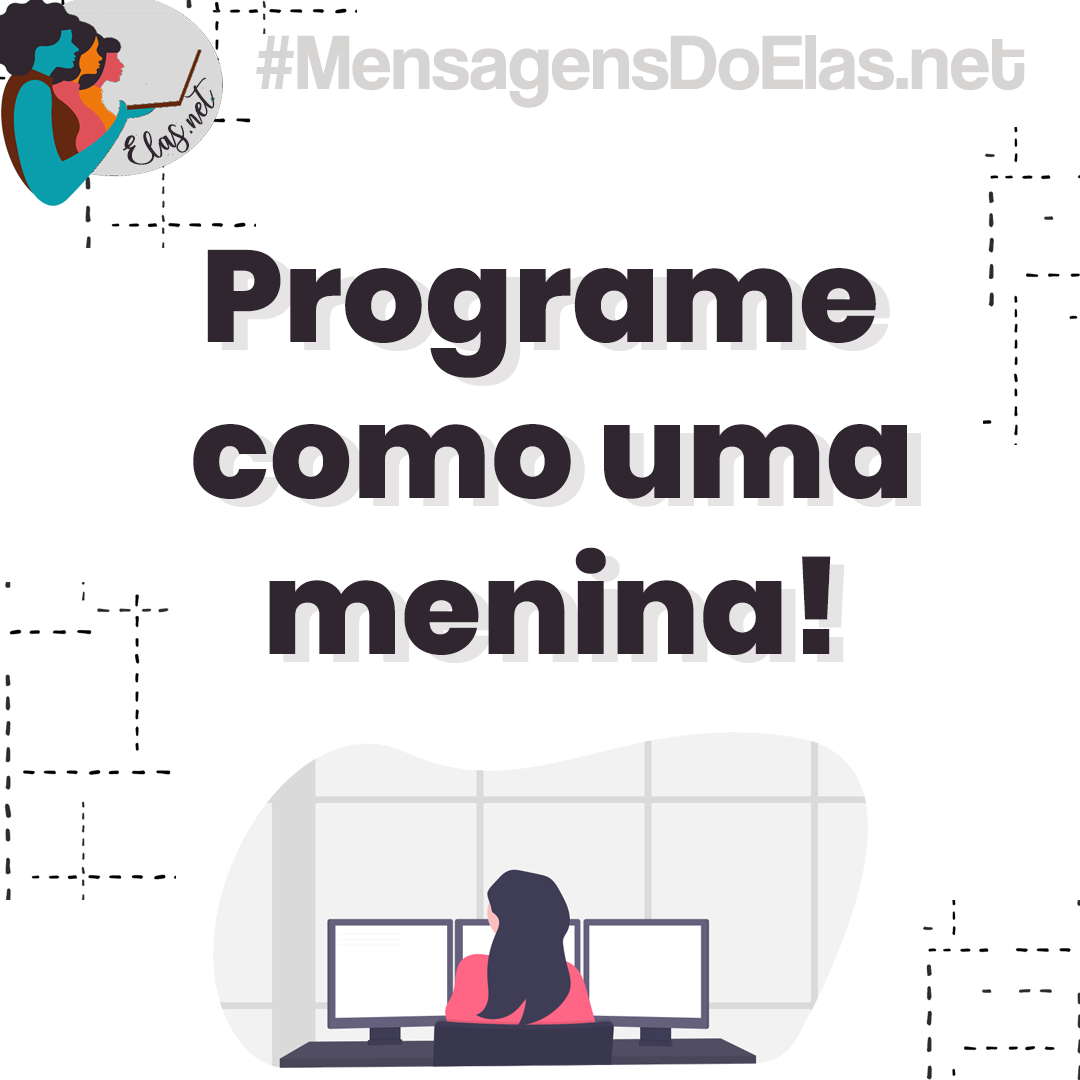
<style>
.page{position:relative;width:1080px;height:1080px;background:#ffffff}
.page>*{position:absolute;margin:0}
.t1{font:80px "CoolveticaRg-Regular";color:#d3cfcf}
.t2{font:25.6px "charlinda-Regular";color:#2f262f;scale:1.18 1}
.t3{font:130px "Poppins-ExtraBold";color:#2f262f}
.t4{font:130px "Poppins-ExtraBold"}
</style>
<div class="page">
<p class="t1" style="left:256px;top:35px;width:769px;height:73px;opacity:0.91">#MensagensDoElas.net</p>
<p class="t2" style="left:123px;top:77px;width:92px;height:88px;rotate:-41deg">Elas.net</p>
<p class="t3" style="left:193px;top:249px;width:714px;height:406px;text-align:center">Programe <br>como uma<br>menina!</p>
<p class="t4" style="left:207px;top:257px;width:714px;height:406px;text-align:center">Programe <br>como uma<br>menina!</p>
</div>
